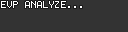
<style>
.page{position:relative;width:128px;height:32px;background:#333333}
.page>*{position:absolute;margin:0}
.t1{font:8px "Terminal";color:#ffffff}
</style>
<div class="page">
<p class="t1" style="left:1px;top:1px;width:81px;height:7px">EVP ANALYZE...</p>
</div>
